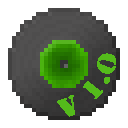
<style>
.page{position:relative;width:128px;height:128px;background:#ffffff}
.page>*{position:absolute;margin:0}
.t1{font:23.9px "StencilStd";color:#54ba1b}
</style>
<div class="page">
<p class="t1" style="left:57px;top:53px;width:59px;height:64px;rotate:-49deg">V 1.0</p>
</div>
